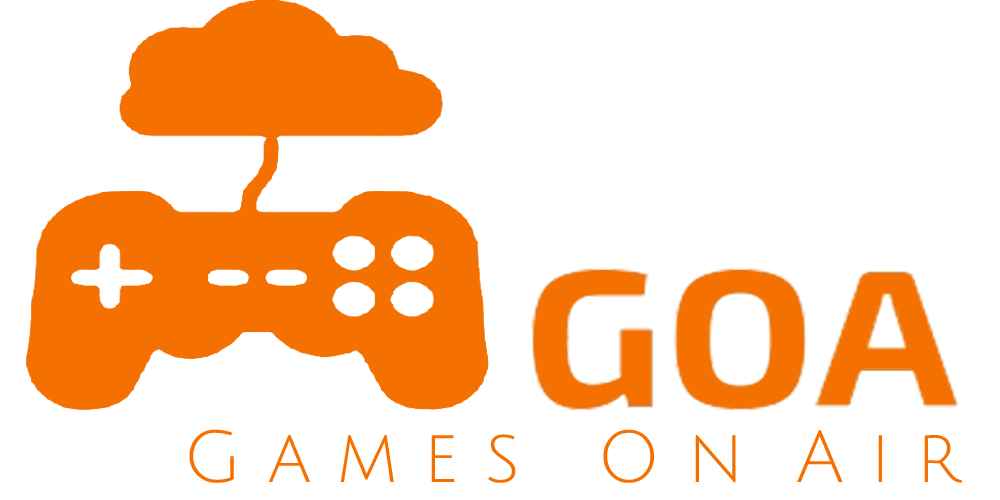
<style>
.page{position:relative;width:1000px;height:500px;background:#ffffff}
.page>*{position:absolute;margin:0}
.t1{font:72px "JuliusSansOne-Regular";color:#f47001}
</style>
<div class="page">
<p class="t1" style="left:189px;top:429px;width:773px;height:54px">G a m e s   O n  A i r</p>
</div>
